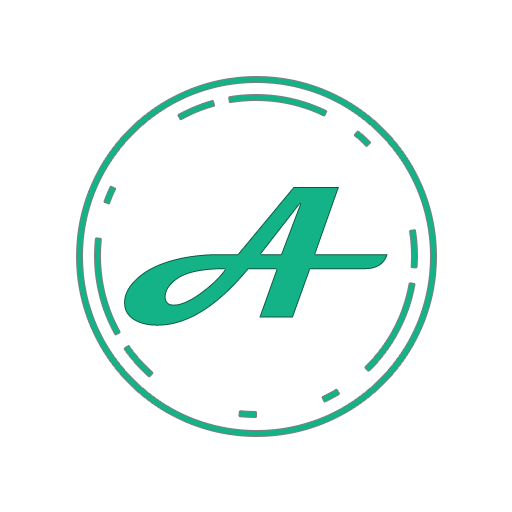
<style>
.page{position:relative;width:512px;height:512px;background:#ffffff}
.page>*{position:absolute;margin:0}
.t1{font:189.6px "Magneto-Bold";color:#14b287}
</style>
<div class="page">
<p class="t1" style="left:124px;top:187px;width:264px;height:139px">A</p>
</div>
